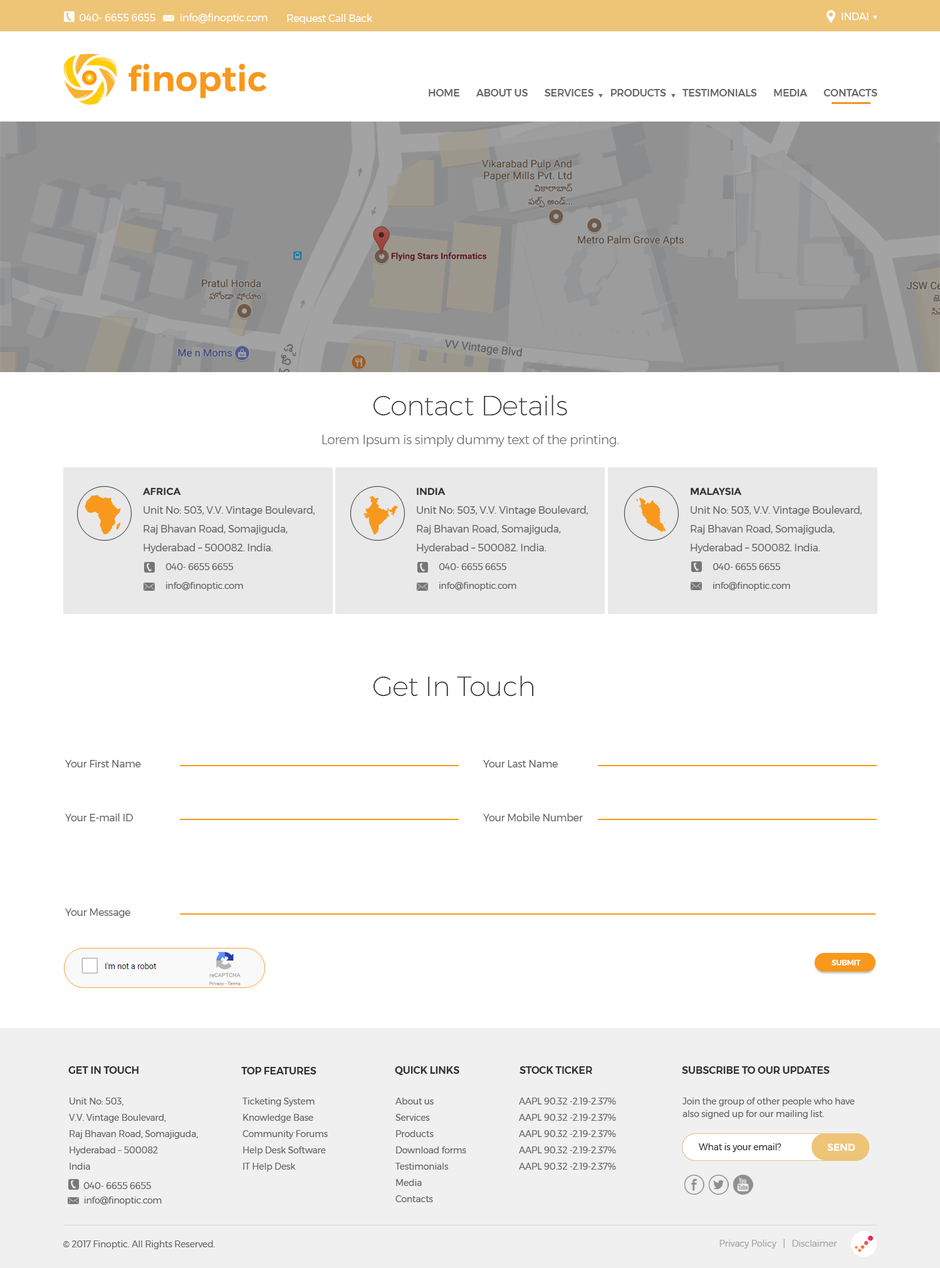
<style>
.page{position:relative;width:940px;height:1268px;background:#ffffff}
.page>*{position:absolute;margin:0}
.t1{font:10px "Montserrat-Regular";letter-spacing:-0.02em;color:#ffffff}
.t2{font:10px "Montserrat-Medium";letter-spacing:-0.01em;color:#666666}
.t3{font:27.6px "Montserrat-ExtraLight";letter-spacing:-0.02em;color:#333333}
.t4{font:12.5px "Montserrat-Light";letter-spacing:-0.02em;color:#666666}
.t5{font:10px/18.8px "Montserrat-Regular";letter-spacing:-0.02em;color:#666666}
.t6{font:10px/18.8px "Montserrat-Bold";letter-spacing:-0.02em;color:#333333}
.t7{font:8.9px/18.8px "Montserrat-Regular";letter-spacing:-0.02em;color:#666666}
.t8{font:10px "Montserrat-Regular";letter-spacing:-0.02em;color:#666666}
.t9{font:7.5px "Montserrat-SemiBold";letter-spacing:-0.02em;color:#ffffff}
.t10{font:10px "Montserrat-SemiBold";letter-spacing:-0.01em;color:#333333}
.t11{font:8.8px/16.3px "Montserrat-Regular";letter-spacing:-0.01em;color:#666666}
.t12{font:8.8px/12.5px "Montserrat-Regular";letter-spacing:-0.01em;color:#666666}
.t13{font:8.8px "Montserrat-Regular";letter-spacing:-0.01em;color:#333333}
.t14{font:10px "Montserrat-Bold";letter-spacing:-0.02em;color:#ffffff}
.t15{font:8.8px "Montserrat-Regular";letter-spacing:-0.02em;color:#666666}
.t16{font:8.9px "Montserrat-Regular";letter-spacing:-0.01em;color:#696969}
.t17{font:8.8px "Montserrat-Regular";letter-spacing:-0.01em;color:#a6a6a6}
</style>
<div class="page">
<p class="t1" style="left:80px;top:14px;width:75px;height:7px">040- 6655 6655</p>
<p class="t1" style="left:180px;top:13px;width:88px;height:11px">info@finoptic.com</p>
<p class="t1" style="left:287px;top:14px;width:86px;height:10px">Request Call Back</p>
<p class="t1" style="left:842px;top:13px;width:27px;height:7px">INDAI</p>
<p class="t2" style="left:429px;top:89px;width:448px;height:8px">HOME       ABOUT US       SERVICES       PRODUCTS       TESTIMONIALS       MEDIA       CONTACTS</p>
<p class="t3" style="left:373px;top:395px;width:194px;height:21px">Contact Details</p>
<p class="t4" style="left:322px;top:435px;width:297px;height:12px">Lorem Ipsum is simply dummy text of the printing.</p>
<p class="t5" style="left:143px;top:488px;width:172px;height:103px"><span class="t6">AFRICA<br></span>Unit No: 503, V.V. Vintage Boulevard,<br>Raj Bhavan Road, Somajiguda, <br>Hyderabad – 500082. India.<br><span class="t7"> 040- 6655 6655<br> info@finoptic.com</span></p>
<p class="t5" style="left:417px;top:488px;width:171px;height:103px"><span class="t6">INDIA<br></span>Unit No: 503, V.V. Vintage Boulevard,<br>Raj Bhavan Road, Somajiguda, <br>Hyderabad – 500082. India.<br><span class="t7"> 040- 6655 6655<br> info@finoptic.com</span></p>
<p class="t5" style="left:691px;top:488px;width:171px;height:103px"><span class="t6">MALAYSIA<br></span>Unit No: 503, V.V. Vintage Boulevard,<br>Raj Bhavan Road, Somajiguda, <br>Hyderabad – 500082. India.<br><span class="t7"> 040- 6655 6655<br> info@finoptic.com</span></p>
<p class="t3" style="left:373px;top:676px;width:161px;height:20px">Get In Touch</p>
<p class="t8" style="left:65px;top:760px;width:76px;height:8px">Your First Name</p>
<p class="t8" style="left:483px;top:760px;width:75px;height:8px">Your Last Name</p>
<p class="t8" style="left:65px;top:813px;width:68px;height:9px">Your E-mail ID</p>
<p class="t8" style="left:483px;top:813px;width:100px;height:9px">Your Mobile Number</p>
<p class="t8" style="left:65px;top:909px;width:65px;height:9px">Your Message</p>
<p class="t9" style="left:832px;top:960px;width:29px;height:6px">SUBMIT</p>
<p class="t10" style="left:68px;top:1067px;width:71px;height:7px">GET IN TOUCH</p>
<p class="t10" style="left:241px;top:1067px;width:75px;height:8px">TOP FEATURES</p>
<p class="t10" style="left:395px;top:1067px;width:64px;height:8px">QUICK LINKS</p>
<p class="t10" style="left:520px;top:1067px;width:72px;height:7px">STOCK TICKER</p>
<p class="t10" style="left:682px;top:1067px;width:148px;height:7px">SUBSCRIBE TO OUR UPDATES</p>
<p class="t11" style="left:68px;top:1098px;width:130px;height:72px">Unit No: 503,<br>V.V. Vintage Boulevard,<br>Raj Bhavan Road, Somajiguda, <br>Hyderabad – 500082 <br>India</p>
<p class="t11" style="left:243px;top:1098px;width:85px;height:74px">Ticketing System<br>Knowledge Base<br>Community Forums<br>Help Desk Software<br>IT Help Desk</p>
<p class="t11" style="left:395px;top:1098px;width:71px;height:105px">About us<br>Services<br>Products<br>Download forms<br>Testimonials<br>Media<br>Contacts</p>
<p class="t11" style="left:518px;top:1098px;width:98px;height:72px">AAPL 90.32 -2.19-2.37%<br>AAPL 90.32 -2.19-2.37%<br>AAPL 90.32 -2.19-2.37%<br>AAPL 90.32 -2.19-2.37%<br>AAPL 90.32 -2.19-2.37%</p>
<p class="t12" style="left:682px;top:1098px;width:173px;height:21px">Join the group of other people who have<br>also signed up for our mailing list.</p>
<p class="t13" style="left:698px;top:1144px;width:84px;height:9px">What is your email?</p>
<p class="t14" style="left:827px;top:1144px;width:28px;height:8px">SEND</p>
<p class="t15" style="left:83px;top:1183px;width:68px;height:6px">040- 6655 6655</p>
<p class="t15" style="left:84px;top:1197px;width:78px;height:9px">info@finoptic.com</p>
<p class="t16" style="left:63px;top:1241px;width:152px;height:9px">© 2017 Finoptic. All Rights Reserved.</p>
<p class="t17" style="left:719px;top:1240px;width:118px;height:9px">Privacy Policy   |   Disclaimer</p>
</div>
